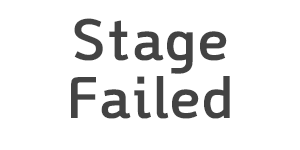
<style>
.page{position:relative;width:300px;height:150px;background:#ffffff}
.page>*{position:absolute;margin:0}
.t1{font:58.3px/58.3px "GyeonggiTitleMOTF";color:#434343}
</style>
<div class="page">
<p class="t1" style="left:71px;top:18px;width:159px;height:101px;text-align:center">Stage<br>Failed</p>
</div>
